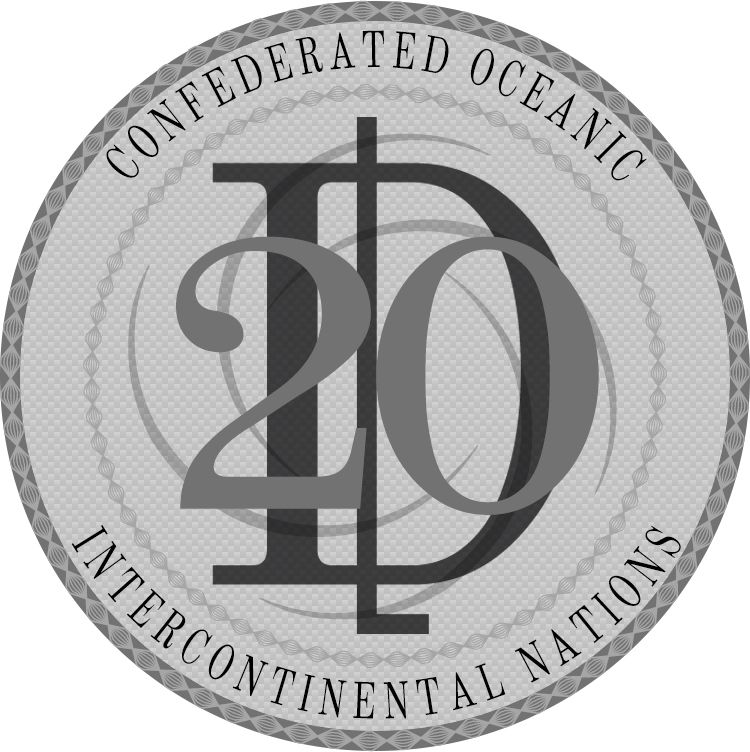
<style>
.page{position:relative;width:750px;height:752px;background:#ffffff}
.page>*{position:absolute;margin:0}
.t1{font:50.9px/33.3px "OldStandardTT-Regular";letter-spacing:0.124em;color:#020202;scale:0.7 1}
.t2{font:388px "OldStandardTT-Regular";letter-spacing:-0.12em;color:#737272;scale:1.19 1}
.t3{font:50.9px "OldStandardTT-Regular";letter-spacing:0.124em;color:#020202;scale:0.7 1}
</style>
<div class="page">
<p class="t1" style="left:106px;top:30px;width:541px;height:151px">CONFEDERATED OCEANIC</p>
<p class="t2" style="left:176px;top:236px;width:423px;height:279px">20</p>
<p class="t3" style="left:71px;top:525px;width:610px;height:194px;rotate:3deg">INTERCONTINENTAL NATIONS</p>
</div>
